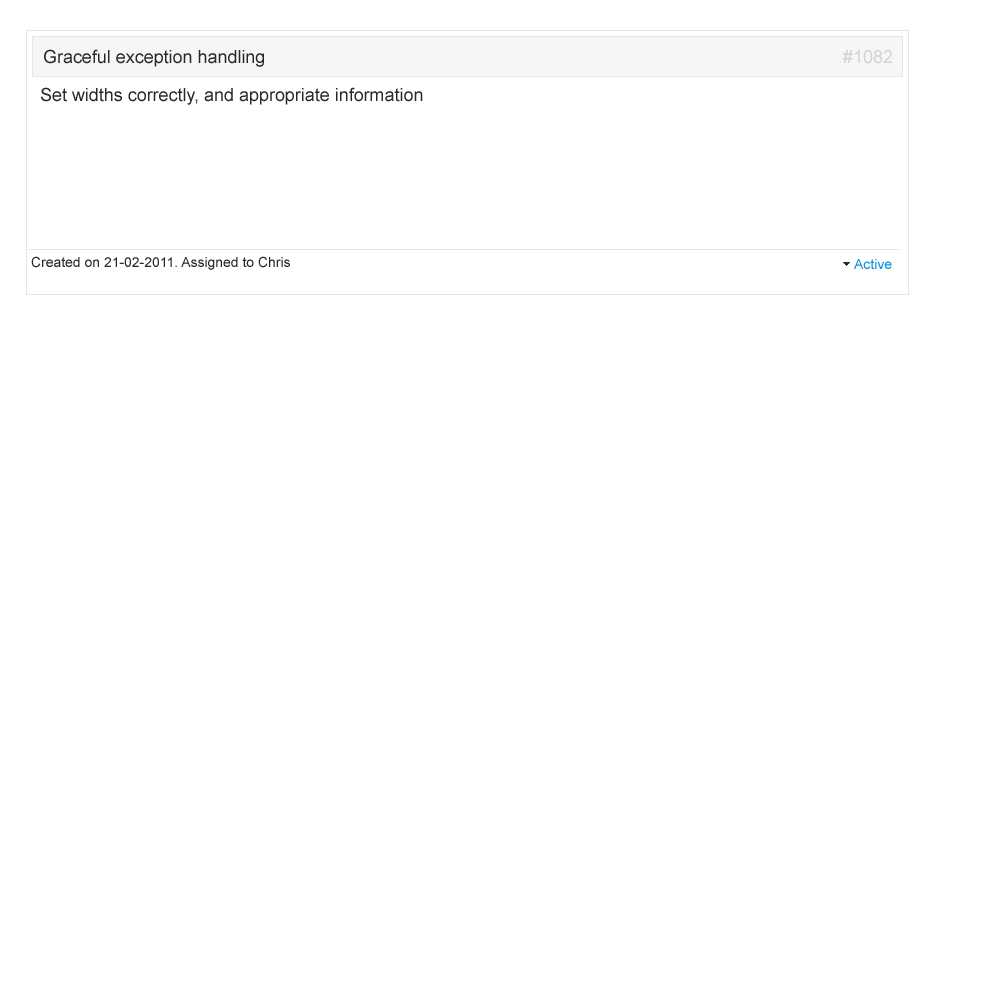
<style>
.page{position:relative;width:1000px;height:1000px;background:#ffffff}
.page>*{position:absolute;margin:0}
.t1{font:17.9px "ArialMT";color:#282828}
.t2{font:17.9px "ArialMT";color:#d1d1d1}
.t3{font:13.9px "ArialMT";color:#282828}
.t4{font:13.9px "ArialMT";color:#0391da}
</style>
<div class="page">
<p class="t1" style="left:44px;top:49px;width:220px;height:18px">Graceful exception handling</p>
<p class="t2" style="left:843px;top:50px;width:49px;height:14px">#1082</p>
<p class="t1" style="left:41px;top:87px;width:382px;height:18px">Set widths correctly, and appropriate information</p>
<p class="t3" style="left:31px;top:256px;width:259px;height:14px">Created on 21-02-2011. Assigned to Chris</p>
<p class="t4" style="left:854px;top:259px;width:38px;height:10px">Active</p>
</div>
